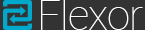
<style>
.page{position:relative;width:145px;height:30px;background:#333333}
.page>*{position:absolute;margin:0}
.t1{font:42px "Roboto-Thin";letter-spacing:-0.02em;color:#ffffff}
</style>
<div class="page">
<p class="t1" style="left:41px;top:0px;width:102px;height:30px">Flexor</p>
</div>
